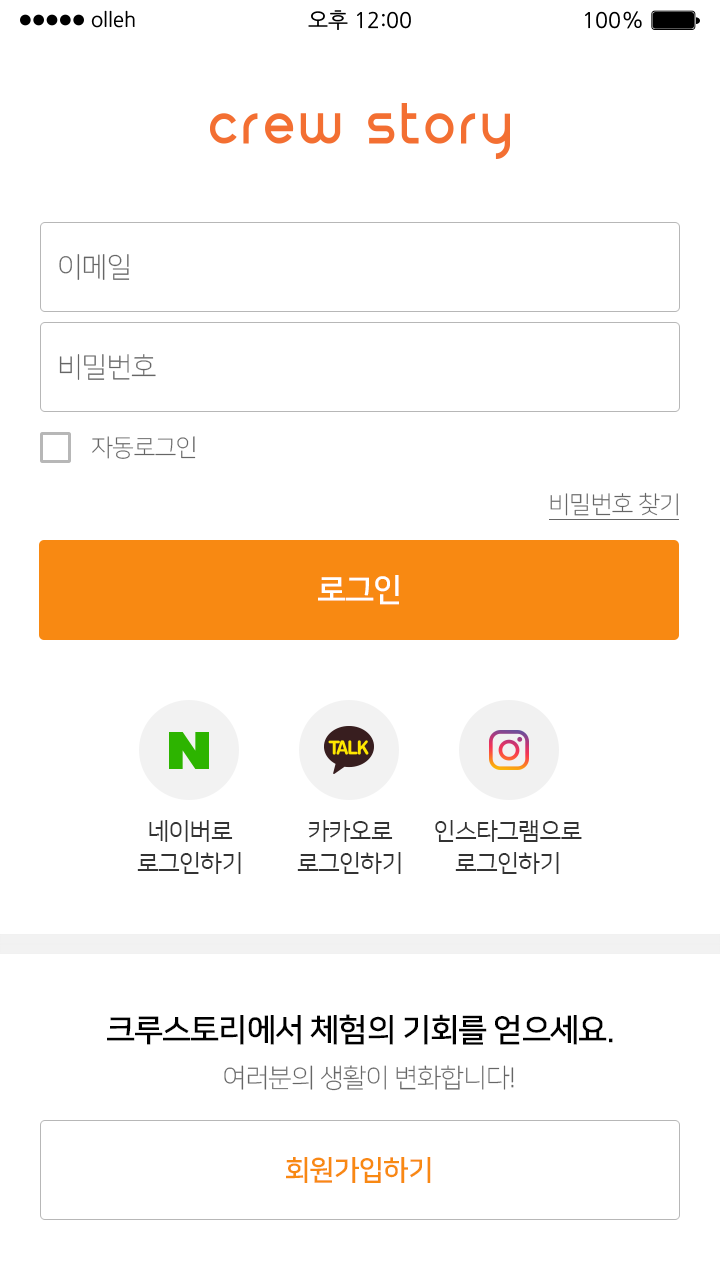
<style>
.page{position:relative;width:720px;height:1280px;background:#ffffff}
.page>*{position:absolute;margin:0}
.t1{font:28px "NanumSquareL";letter-spacing:-0.03em;color:#666666}
.t2{font:24px "NanumSquareL";letter-spacing:-0.03em;color:#666666}
.t3{font:32px "NanumSquareB";letter-spacing:-0.03em;color:#ffffff}
.t4{font:24px/32px "NanumSquareR";letter-spacing:-0.03em;color:#333333}
.t5{font:32px "NanumSquareB";letter-spacing:-0.03em;color:#000000}
.t6{font:26px "NanumSquareL";letter-spacing:-0.03em;color:#666666}
.t7{font:28px "NanumSquareB";letter-spacing:-0.03em;color:#f88912}
</style>
<div class="page">
<p class="t1" style="left:59px;top:254px;width:71px;height:26px">이메일</p>
<p class="t1" style="left:59px;top:354px;width:97px;height:26px">비밀번호</p>
<p class="t2" style="left:92px;top:436px;width:104px;height:23px">자동로그인</p>
<p class="t2" style="left:550px;top:492px;width:128px;height:24px">비밀번호 찾기</p>
<p class="t3" style="left:318px;top:575px;width:81px;height:30px">로그인</p>
<p class="t4" style="left:137px;top:820px;width:104px;height:54px;text-align:center">네이버로<br>로그인하기</p>
<p class="t4" style="left:297px;top:820px;width:104px;height:54px;text-align:center">카카오로<br>로그인하기</p>
<p class="t4" style="left:435px;top:820px;width:147px;height:54px;text-align:center">인스타그램으로<br>로그인하기</p>
<p class="t5" style="left:107px;top:1014px;width:506px;height:31px">크루스토리에서 체험의 기회를 얻으세요.</p>
<p class="t6" style="left:224px;top:1065px;width:290px;height:26px">여러분의 생활이 변화합니다!</p>
<p class="t7" style="left:286px;top:1157px;width:145px;height:26px">회원가입하기</p>
</div>
